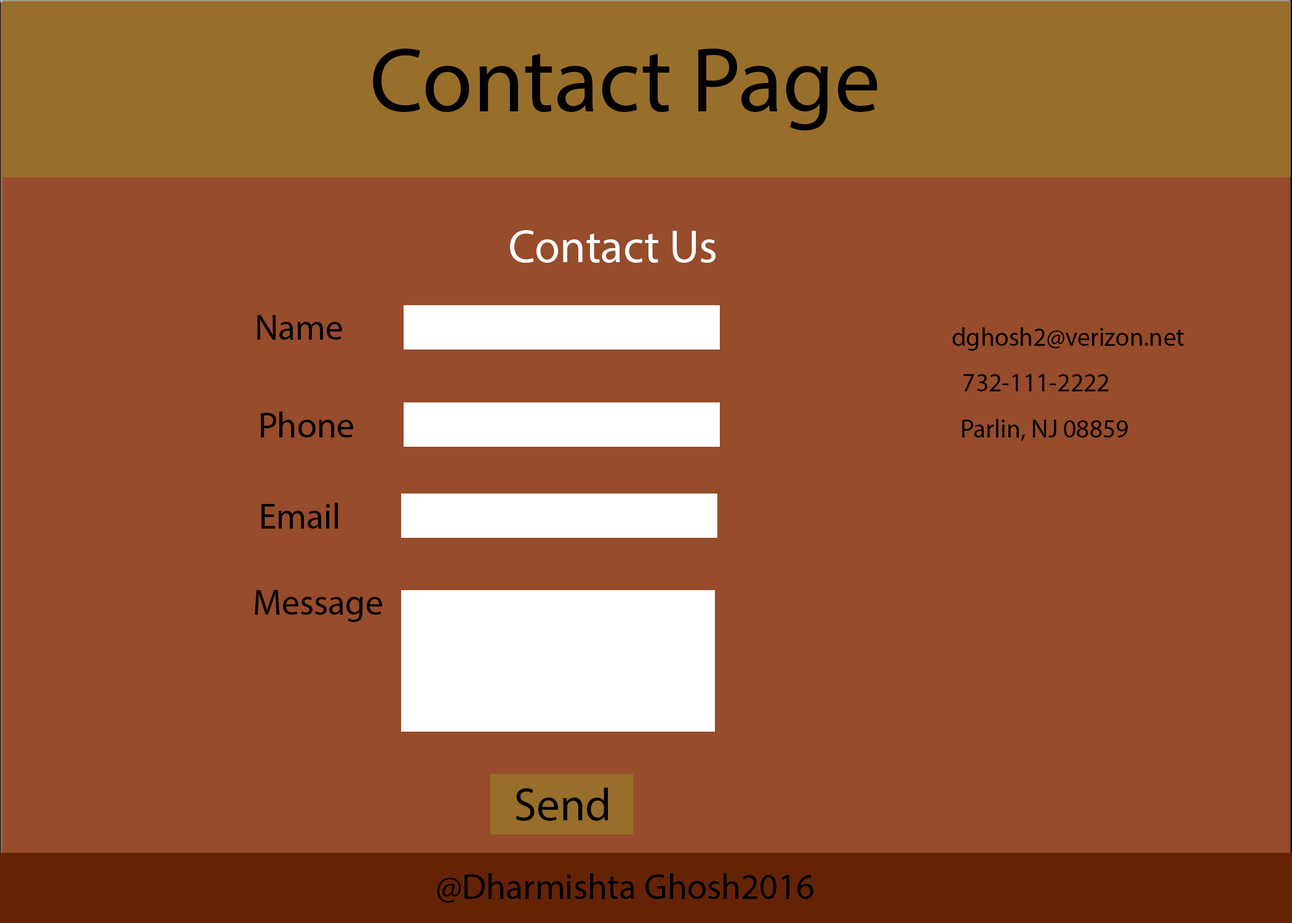
<style>
.page{position:relative;width:1292px;height:923px;background:#974c2b}
.page>*{position:absolute;margin:0}
.t1{font:92.3px "MyriadPro-Regular";color:#000000}
.t2{font:46.1px "MyriadPro-Regular";color:#ffffff}
.t3{font:35.9px "MyriadPro-Regular";color:#000000}
.t4{font:25.6px "MyriadPro-Regular";color:#000000}
.t5{font:46.1px "MyriadPro-Regular";color:#000000}
</style>
<div class="page">
<p class="t1" style="left:373px;top:48px;width:504px;height:82px">Contact Page</p>
<p class="t2" style="left:510px;top:230px;width:206px;height:33px">Contact Us</p>
<p class="t3" style="left:257px;top:315px;width:85px;height:25px">Name</p>
<p class="t4" style="left:952px;top:327px;width:232px;height:24px">dghosh2@verizon.net</p>
<p class="t4" style="left:964px;top:374px;width:145px;height:17px">732-111-2222</p>
<p class="t3" style="left:261px;top:412px;width:92px;height:25px">Phone</p>
<p class="t4" style="left:962px;top:419px;width:166px;height:22px">Parlin, NJ 08859</p>
<p class="t3" style="left:261px;top:503px;width:77px;height:26px">Email</p>
<p class="t3" style="left:255px;top:590px;width:127px;height:32px">Message</p>
<p class="t5" style="left:516px;top:788px;width:92px;height:33px">Send</p>
<p class="t3" style="left:437px;top:873px;width:376px;height:30px">@Dharmishta Ghosh2016</p>
</div>
